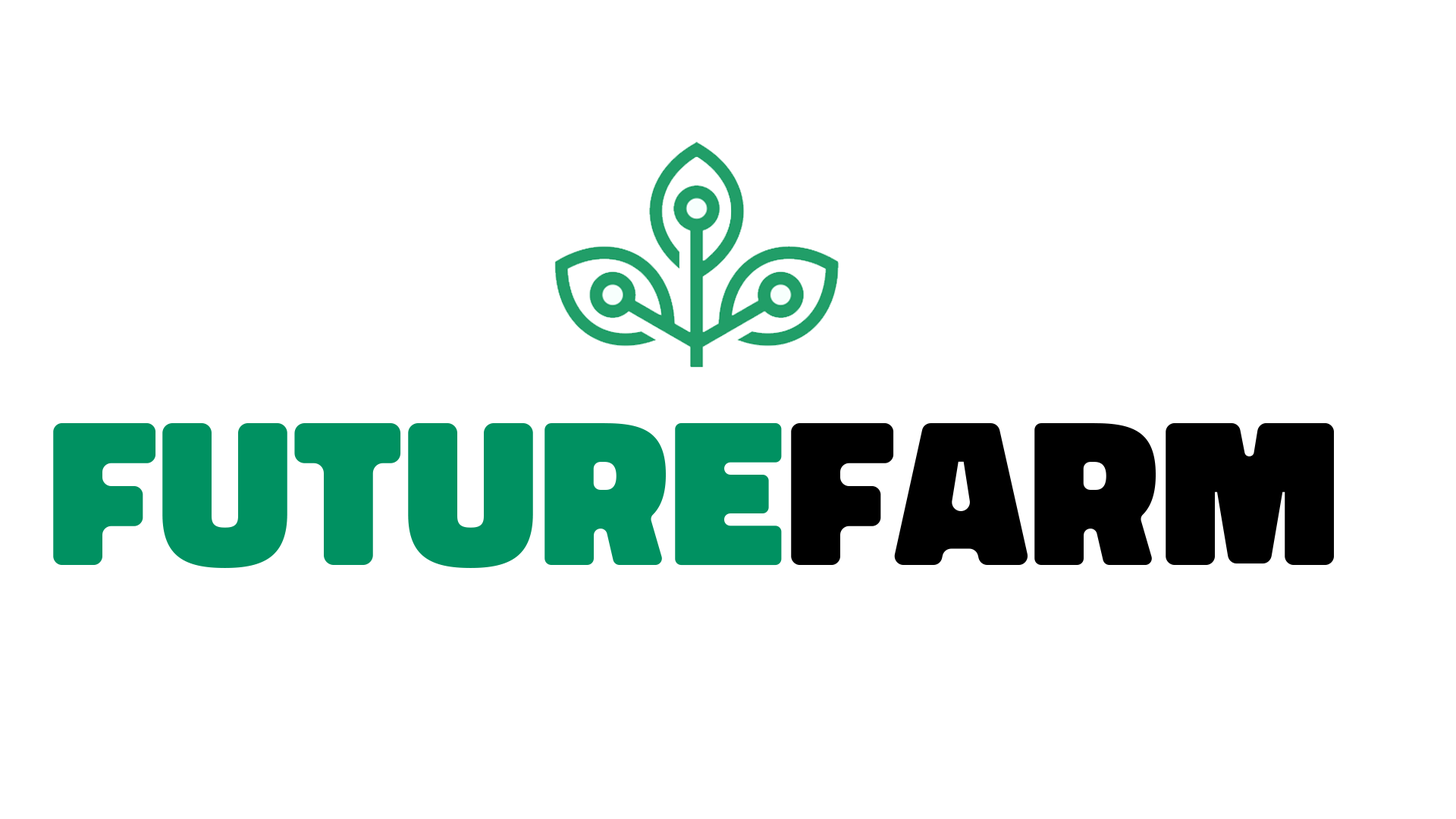
<style>
.page{position:relative;width:1456px;height:819px;background:#ffffff}
.page>*{position:absolute;margin:0}
.t1{font:211.7px "DonJose-Black";color:#009161}
.t2{font:211.7px "DonJose-Black";color:#000000}
</style>
<div class="page">
<p class="t1" style="left:53px;top:422px;width:1281px;height:146px">FUTURE<span class="t2">Farm</span></p>
</div>
